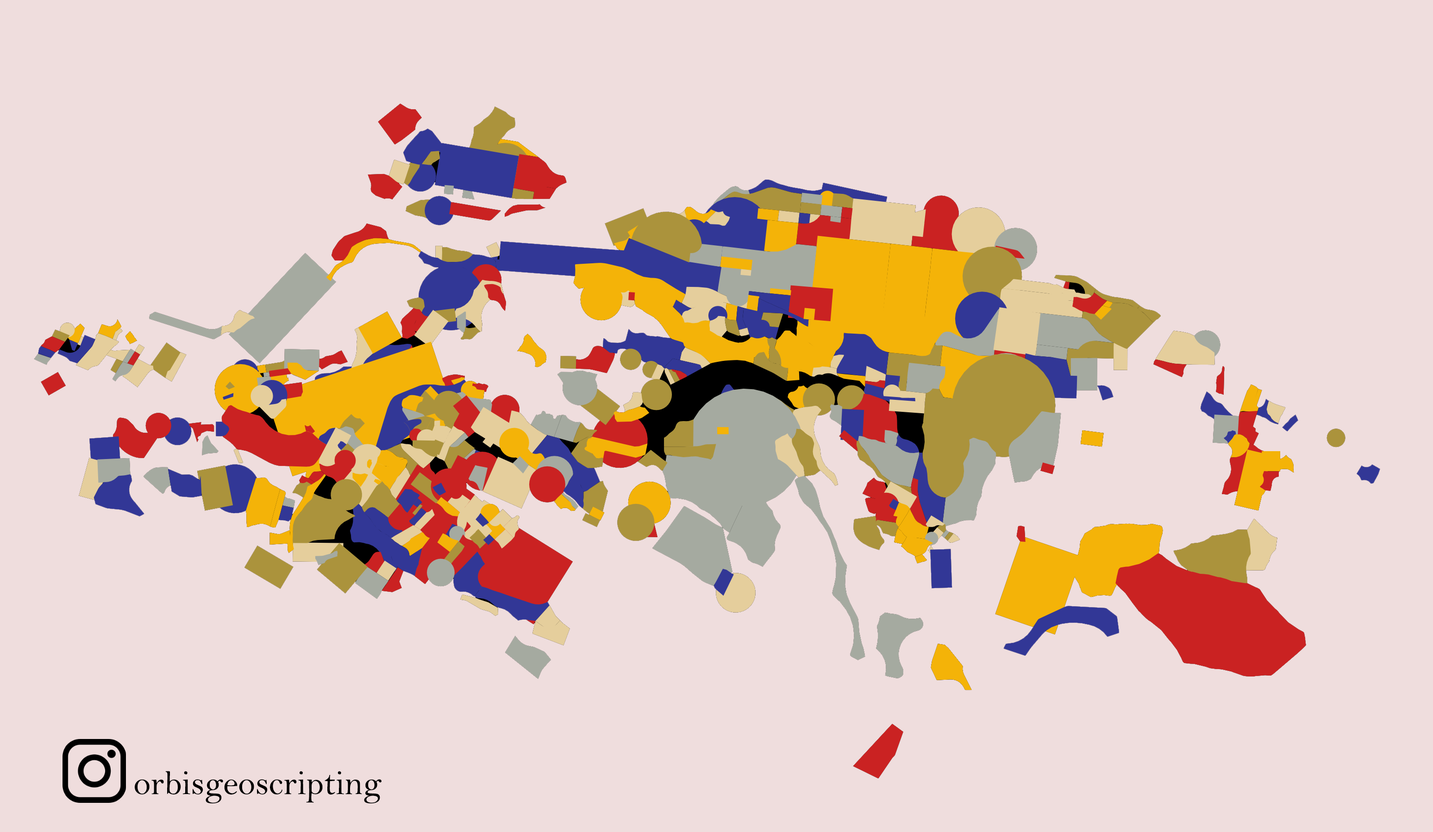
<style>
.page{position:relative;width:1433px;height:832px;background:#efdddd}
.page>*{position:absolute;margin:0}
.t1{font:34.7px "BellMT";color:#000000}
</style>
<div class="page">
<p class="t1" style="left:135px;top:771px;width:246px;height:33px">orbisgeoscripting</p>
</div>
